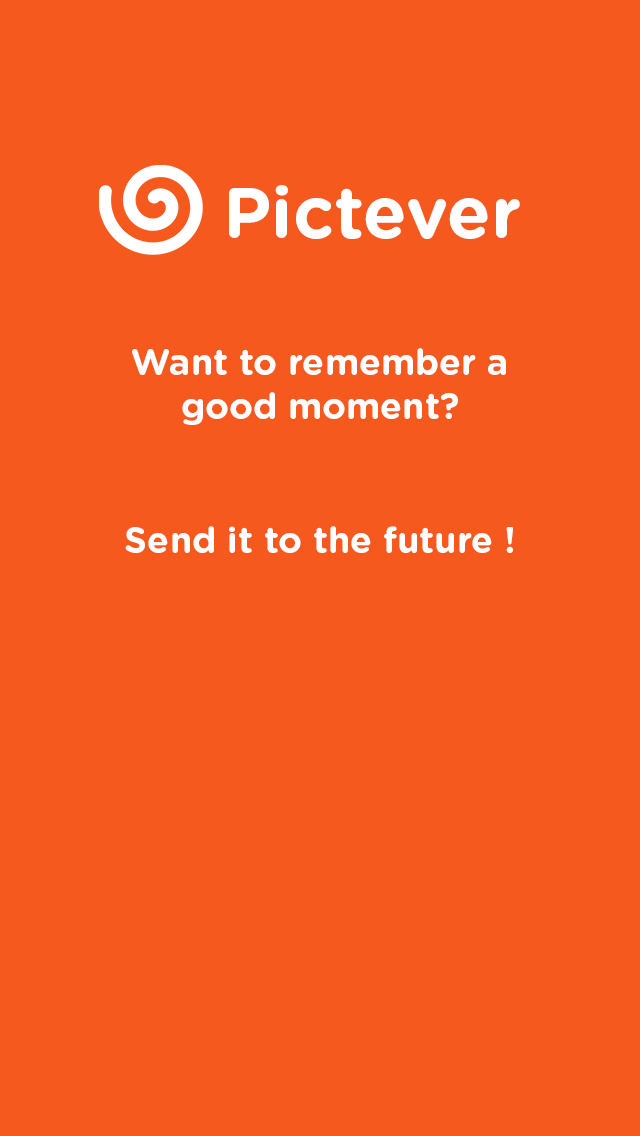
<style>
.page{position:relative;width:640px;height:1136px;background:#f6591e}
.page>*{position:absolute;margin:0}
.t1{font:72px "GothamRounded-Bold";color:#fefffe}
.t2{font:36px "GothamRounded-Bold";color:#fefffe}
</style>
<div class="page">
<p class="t1" style="left:229px;top:185px;width:291px;height:54px">Pictever</p>
<p class="t2" style="left:132px;top:348px;width:374px;height:77px;text-align:center">Want to remember a good moment?</p>
<p class="t2" style="left:125px;top:526px;width:388px;height:27px">Send it to the future !</p>
</div>
